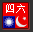
<style>
.page{position:relative;width:33px;height:32px;background:#333333}
.page>*{position:absolute;margin:0}
.t1{font:10.4px "SimSun";color:#ffffff}
</style>
<div class="page">
<p class="t1" style="left:6px;top:4px;width:19px;height:9px">四六</p>
</div>
